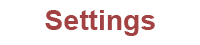
<style>
.page{position:relative;width:200px;height:45px;background:#ffffff}
.page>*{position:absolute;margin:0}
.t1{font:27.9px "Arial-BoldMT";color:#a24242}
</style>
<div class="page">
<p class="t1" style="left:45px;top:10px;width:110px;height:26px">Settings</p>
</div>
